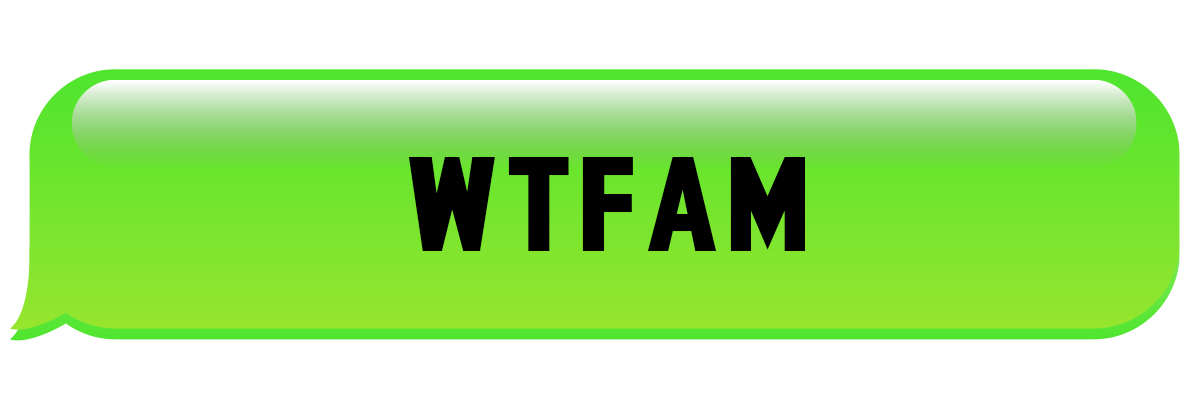
<style>
.page{position:relative;width:1199px;height:400px;background:#ffffff}
.page>*{position:absolute;margin:0}
.t1{font:117.7px "WagnerZip-Change";letter-spacing:0.025em;color:#000000}
</style>
<div class="page">
<p class="t1" style="left:408px;top:157px;width:397px;height:94px">WTFAM</p>
</div>
